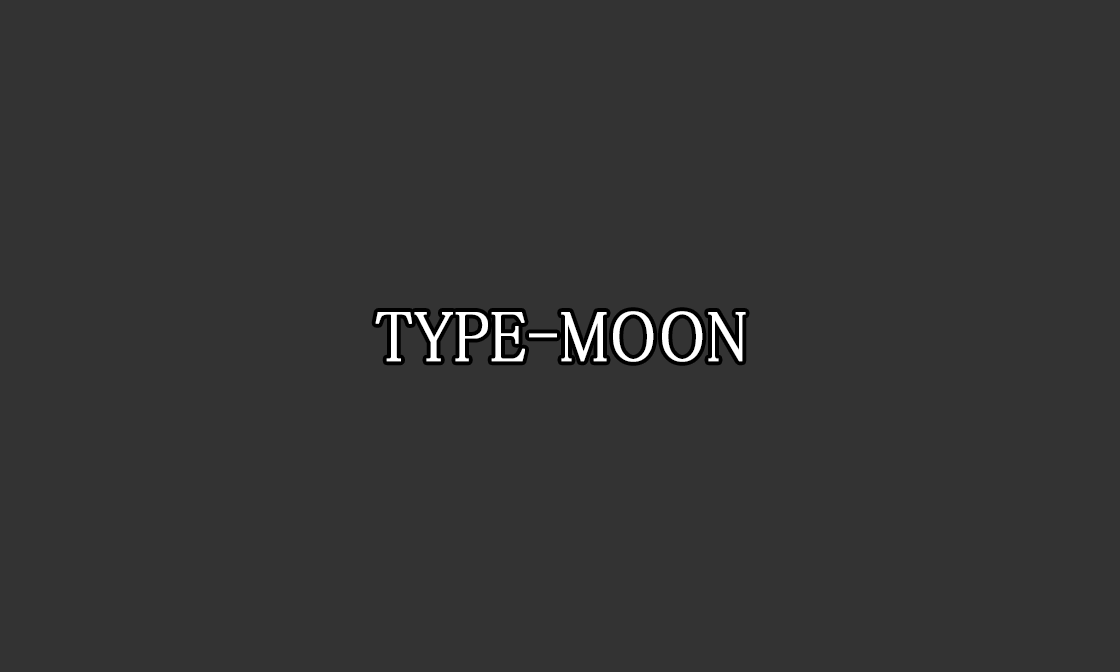
<style>
.page{position:relative;width:1120px;height:672px;background:#333333}
.page>*{position:absolute;margin:0}
.t1{font:72.2px "MS-PMincho";color:#ffffff;font-weight:bold;scale:0.84 1}
</style>
<div class="page">
<p class="t1" style="left:375px;top:311px;width:371px;height:51px">TYPE-MOON</p>
</div>
